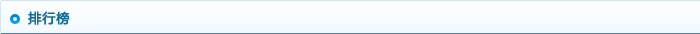
<style>
.page{position:relative;width:700px;height:34px}
.page>*{position:absolute;margin:0}
.t1{font:13px "MicrosoftYaHei";letter-spacing:0.05em;color:#136e94;font-weight:bold}
</style>
<div class="page">
<p class="t1" style="left:28px;top:11px;width:42px;height:14px">排行榜</p>
</div>
